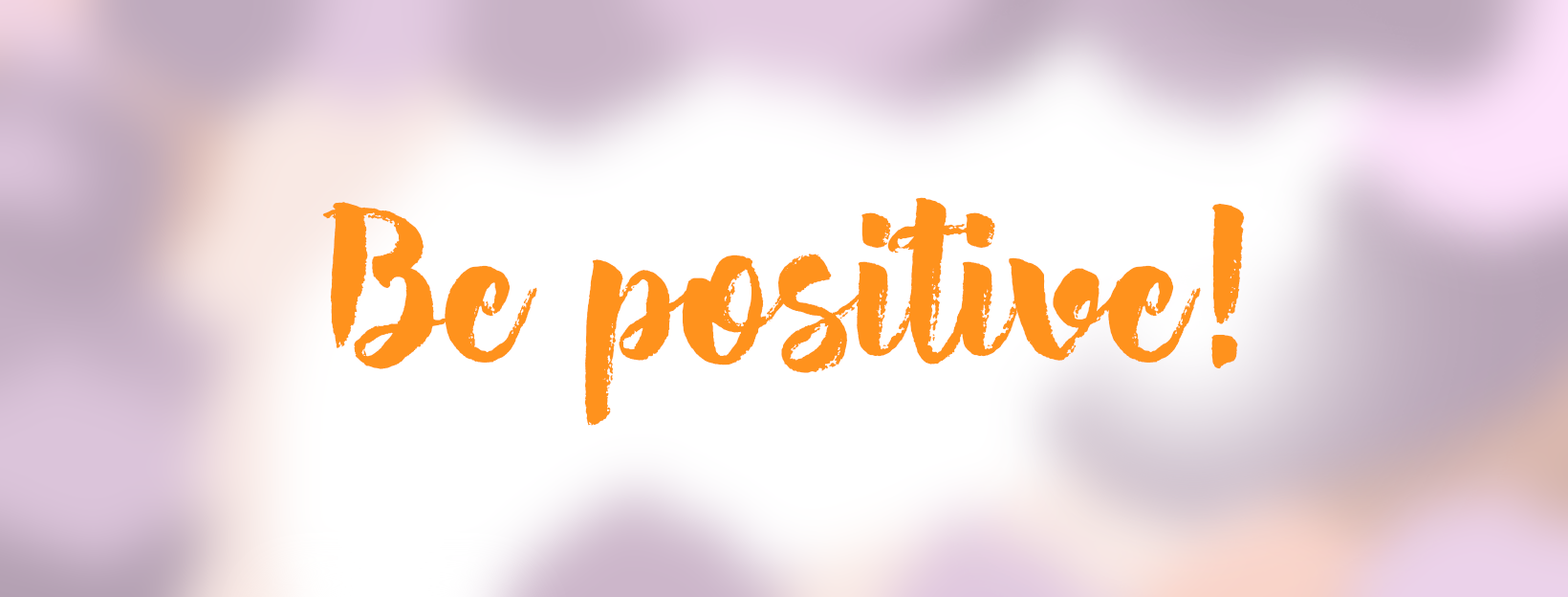
<style>
.page{position:relative;width:1568px;height:597px}
.page>*{position:absolute;margin:0}
.t1{font:210.3px "Hensa-Regular";color:#ff921d}
</style>
<div class="page">
<p class="t1" style="left:322px;top:197px;width:923px;height:228px">Be positive!</p>
</div>
